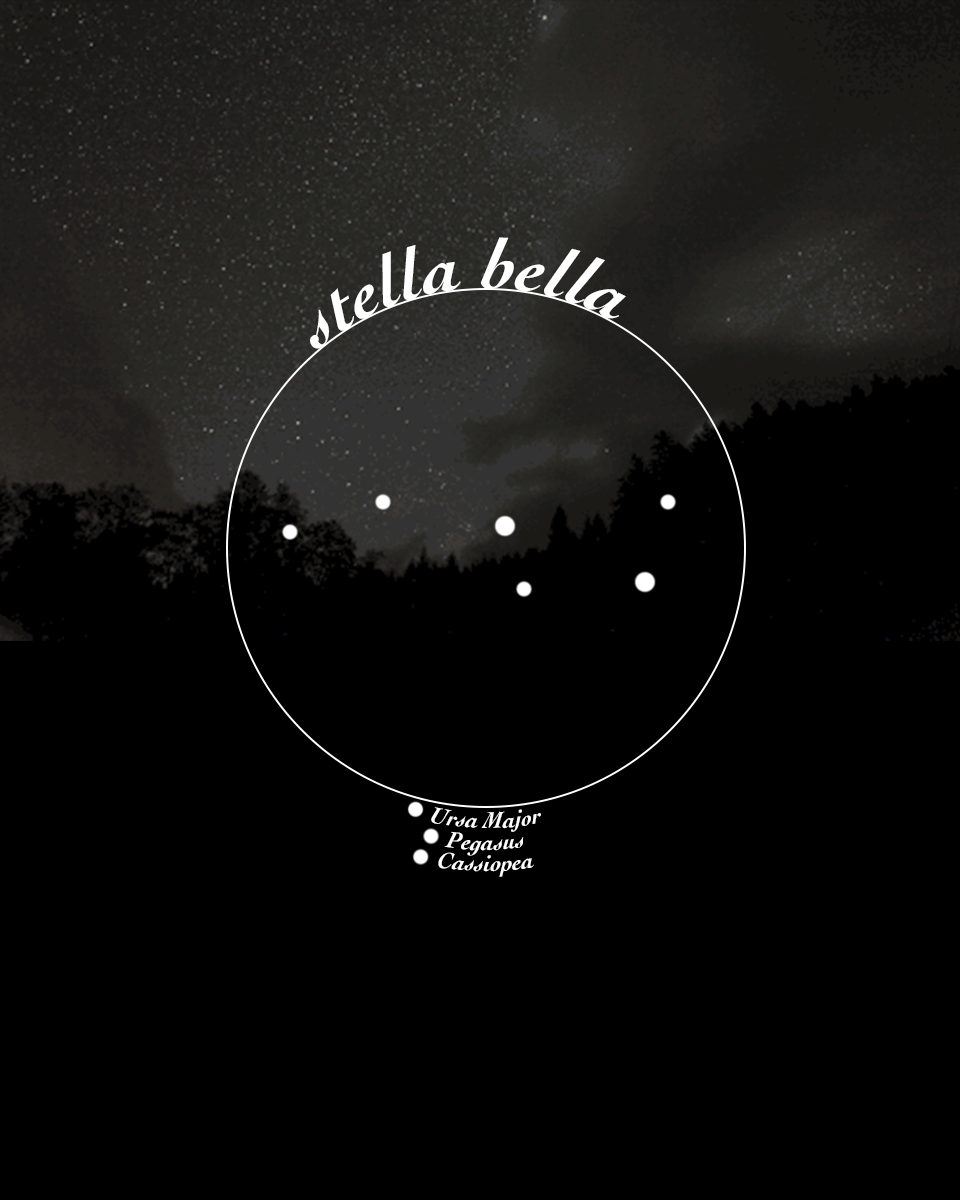
<style>
.page{position:relative;width:960px;height:1200px;background:#000000}
.page>*{position:absolute;margin:0}
.t1{font:72px "Cochin-BoldItalic";color:#ffffff}
.t2{font:24px "Cochin-BoldItalic";color:#ffffff}
</style>
<div class="page">
<p class="t1" style="left:310px;top:237px;width:316px;height:112px">stella bella</p>
<p class="t2" style="left:431px;top:807px;width:110px;height:25px">Ursa Major</p>
<p class="t2" style="left:444px;top:831px;width:80px;height:25px">Pegasus</p>
<p class="t2" style="left:438px;top:852px;width:96px;height:25px">Cassiopea</p>
</div>
